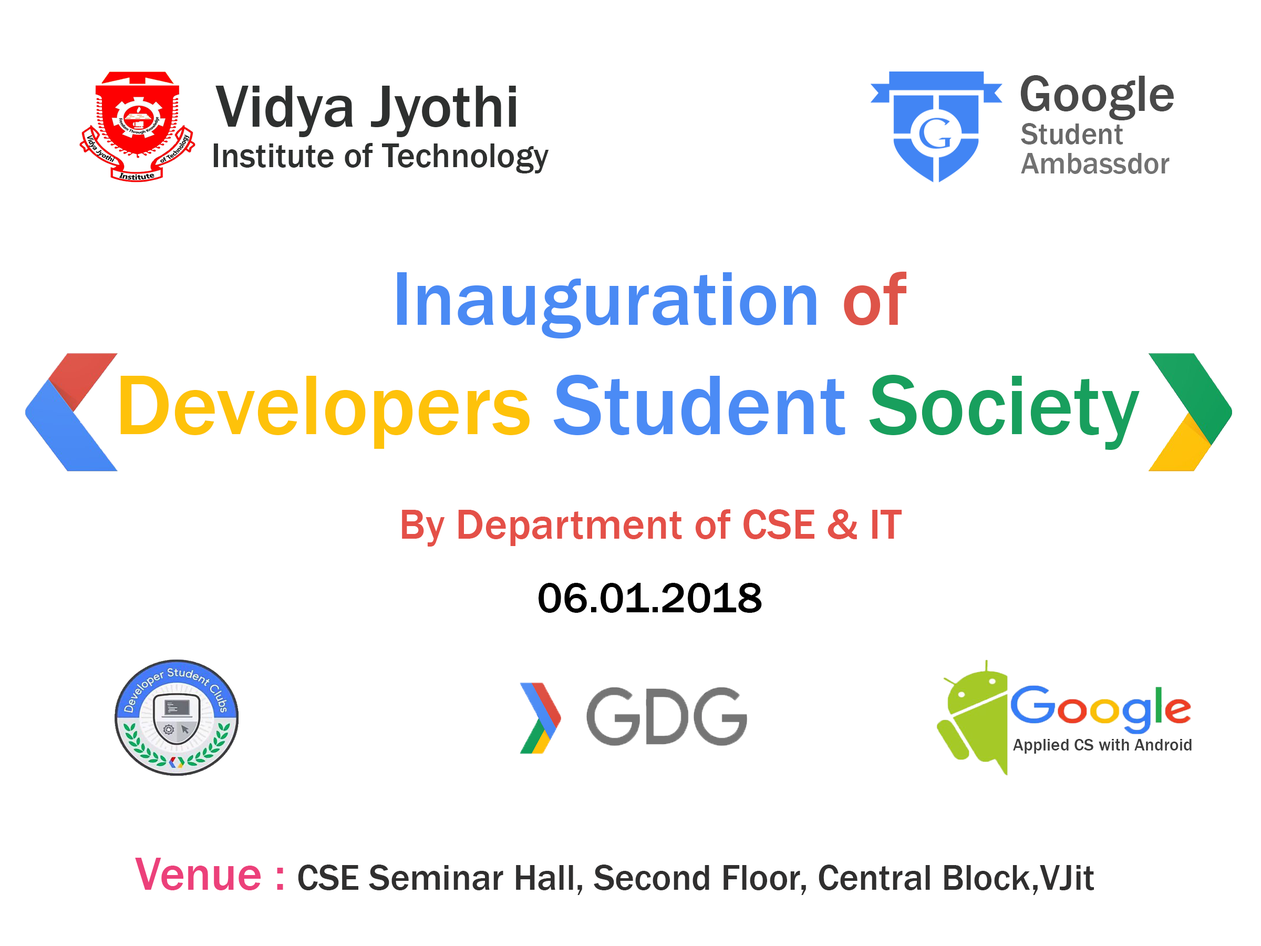
<style>
.page{position:relative;width:1261px;height:946px;background:#ffffff}
.page>*{position:absolute;margin:0}
.t1{font:52.5px "FranklinGothic-Medium";color:#494949}
.t2{font:61.3px "FranklinGothic-Medium";color:#2e302f}
.t3{font:30.6px "FranklinGothic-Medium";color:#686868}
.t4{font:35px "FranklinGothic-Medium";color:#2e302f}
.t5{font:30.6px "FranklinGothic-Medium";color:#727272}
.t6{font:78.8px "FranklinGothic-Medium";color:#4a8af4}
.t7{font:78.8px "FranklinGothic-Medium";color:#de5449}
.t8{font:87.6px "FranklinGothic-Medium";color:#fec20a}
.t9{font:87.6px "FranklinGothic-Medium";color:#4b8bf5}
.t10{font:87.6px "FranklinGothic-Medium";color:#189f5d}
.t11{font:43.8px "FranklinGothic-Medium";color:#e45048}
.t12{font:43.8px "FranklinGothic-Medium";color:#000000}
.t13{font:17.5px "FranklinGothic-Medium";color:#3d3d3d}
.t14{font:48.2px "FranklinGothic-Medium";color:#ec407a}
.t15{font:37.2px "FranklinGothic-Medium";color:#302f2f}
</style>
<div class="page">
<p class="t1" style="left:1020px;top:75px;width:154px;height:45px">Google</p>
<p class="t2" style="left:215px;top:86px;width:301px;height:51px">Vidya Jyothi</p>
<p class="t3" style="left:1021px;top:123px;width:102px;height:21px">Student</p>
<p class="t4" style="left:213px;top:143px;width:336px;height:30px">Institute of Technology</p>
<p class="t5" style="left:1021px;top:153px;width:148px;height:21px">Ambassdor</p>
<p class="t6" style="left:397px;top:271px;width:510px;height:67px">Inauguration <span class="t7">of</span></p>
<p class="t8" style="left:120px;top:375px;width:1020px;height:75px">Developers <span class="t9">Student </span><span class="t10">Society</span></p>
<p class="t11" style="left:402px;top:509px;width:500px;height:37px">By Department of CSE &amp; IT</p>
<p class="t12" style="left:539px;top:583px;width:223px;height:30px">06.01.2018</p>
<p class="t13" style="left:1013px;top:739px;width:179px;height:14px">Applied CS with Android</p>
<p class="t14" style="left:135px;top:857px;width:148px;height:33px">Venue :</p>
<p class="t15" style="left:298px;top:864px;width:796px;height:31px">CSE Seminar Hall, Second Floor, Central Block,VJit</p>
</div>
